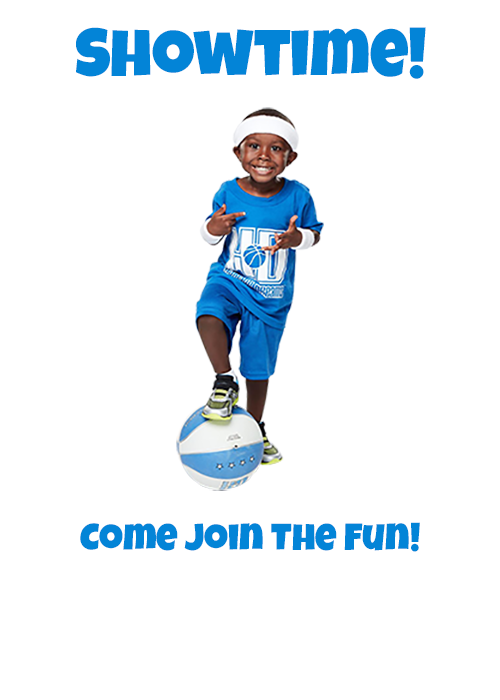
<style>
.page{position:relative;width:500px;height:700px;background:#ffffff}
.page>*{position:absolute;margin:0}
.t1{font:66.7px "LuckiestGuy-Regular";color:#0384d7}
.t2{font:37.5px "LuckiestGuy-Regular";color:#0384d7}
</style>
<div class="page">
<p class="t1" style="left:76px;top:27px;width:350px;height:52px">Showtime!</p>
<p class="t2" style="left:80px;top:522px;width:340px;height:30px">Come Join The Fun!</p>
</div>
